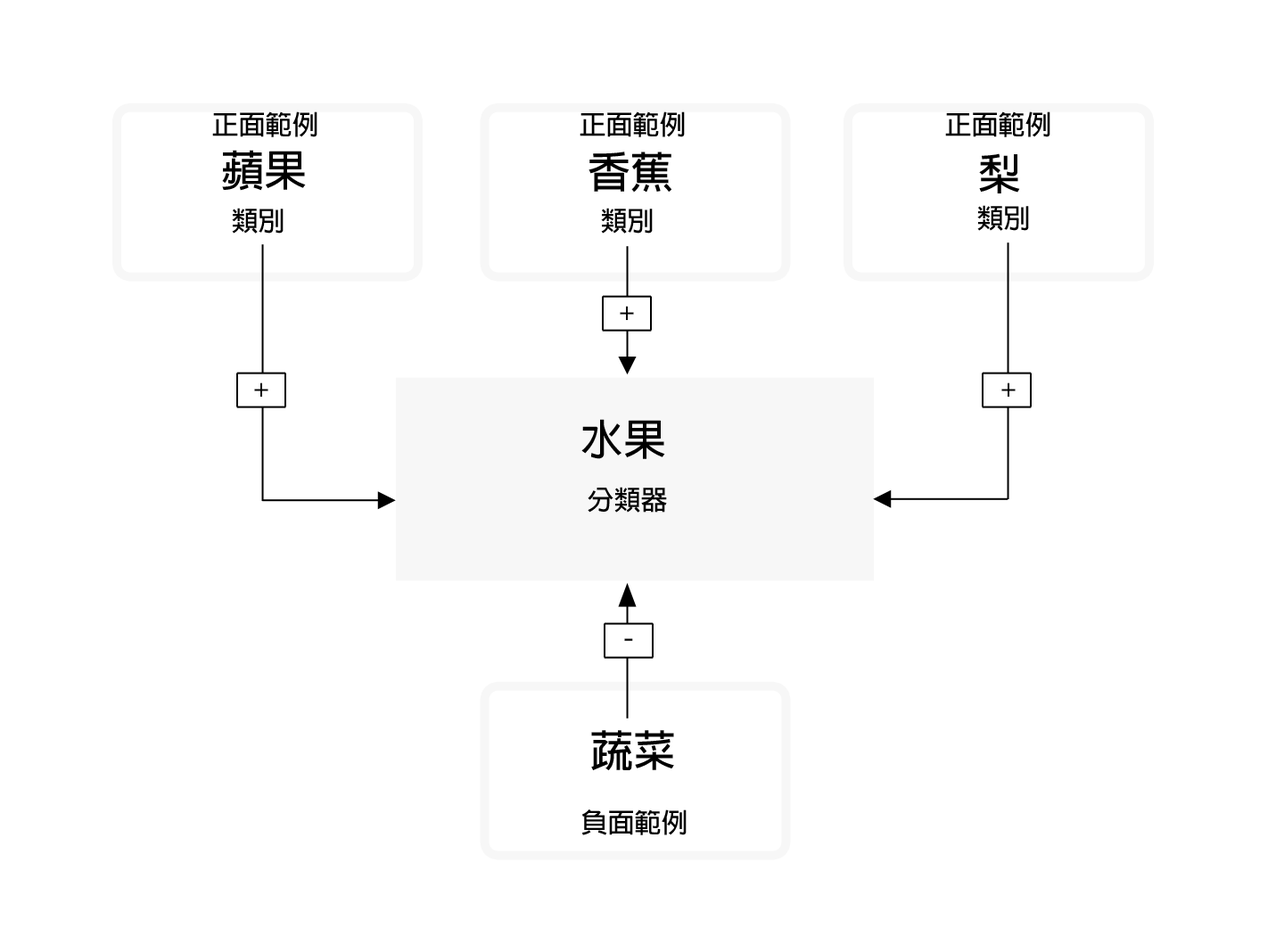
<style>
.page{position:relative;width:1284px;height:928px;background:#ffffff}
.page>*{position:absolute;margin:0}
.t1{font:26.8px "AdobeFanHeitiStd-Bold";color:#000000}
.t2{font:42.8px "AdobeFanHeitiStd-Bold";color:#000000}
.t3{font:26.8px "HelvNeueforIBM";color:#000000}
</style>
<div class="page">
<p class="t1" style="left:212px;top:111px;width:106px;height:26px">正面範例</p>
<p class="t1" style="left:580px;top:111px;width:105px;height:26px">正面範例</p>
<p class="t1" style="left:945px;top:111px;width:106px;height:26px">正面範例</p>
<p class="t2" style="left:222px;top:150px;width:84px;height:41px">蘋果</p>
<p class="t2" style="left:589px;top:152px;width:83px;height:41px">香蕉</p>
<p class="t2" style="left:979px;top:153px;width:41px;height:41px">梨</p>
<p class="t1" style="left:232px;top:208px;width:52px;height:26px">類別</p>
<p class="t1" style="left:601px;top:208px;width:52px;height:26px">類別</p>
<p class="t1" style="left:978px;top:205px;width:51px;height:26px">類別</p>
<p class="t3" style="left:620px;top:306px;width:14px;height:14px">+</p>
<p class="t3" style="left:254px;top:383px;width:14px;height:14px">+</p>
<p class="t3" style="left:1002px;top:383px;width:14px;height:14px">+</p>
<p class="t2" style="left:582px;top:419px;width:83px;height:40px">水果</p>
<p class="t1" style="left:588px;top:487px;width:79px;height:26px">分類器</p>
<p class="t3" style="left:624px;top:639px;width:9px;height:2px">-</p>
<p class="t2" style="left:591px;top:730px;width:83px;height:41px">蔬菜</p>
<p class="t1" style="left:582px;top:810px;width:105px;height:26px">負面範例</p>
</div>
